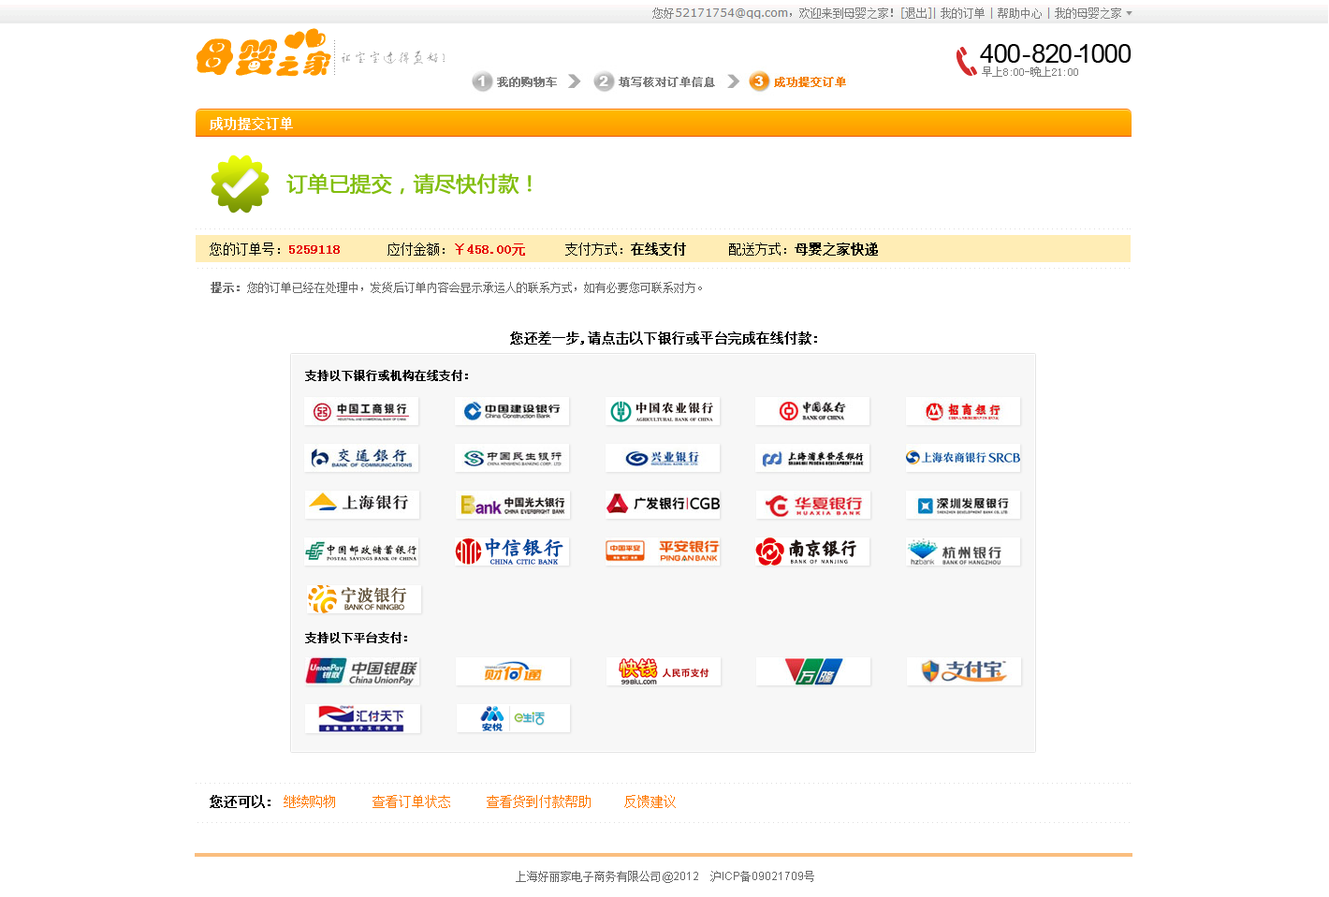
<style>
.page{position:relative;width:1329px;height:897px;background:#ffffff}
.page>*{position:absolute;margin:0}
.t1{font:13.1px "SimSun";color:#ffffff;font-weight:bold}
.t2{font:20.6px "MicrosoftYaHei";color:#82be0e;font-weight:bold}
.t3{font:13.1px "SimSun";color:#e60000;font-weight:bold}
.t4{font:13.1px "SimSun";color:#000000}
.t5{font:13.1px "SimSun";color:#000000;font-weight:bold}
.t6{font:11.2px "SimSun";color:#666666}
.t7{font:11.2px "SimSun";color:#666666;font-weight:bold}
.t8{font:11.2px "SimSun";color:#000000;font-weight:bold}
.t9{font:13.1px "SimSun";color:#ff7800}
.t10{font:11.2px "ArialMT";color:#666666}
</style>
<div class="page">
<p class="t1" style="left:210px;top:117px;width:83px;height:13px">成功提交订单</p>
<p class="t2" style="left:286px;top:173px;width:246px;height:22px">订单已提交，请尽快付款！</p>
<p class="t3" style="left:210px;top:242px;width:668px;height:14px"><span class="t4">您的订单号：</span>5259118  <span class="t4">应付金额：</span>￥458.00元   <span class="t4">支付方式：</span><span class="t5">在线支付  </span><span class="t4">配送方式：</span><span class="t5">母婴之家快递</span></p>
<p class="t6" style="left:211px;top:282px;width:491px;height:11px"><span class="t7">提示：</span>您的订单已经在处理中，发货后订单内容会显示承运人的联系方式，如有必要您可联系对方。</p>
<p class="t5" style="left:510px;top:331px;width:307px;height:14px">您还差一步,请点击以下银行或平台完成在线付款:</p>
<p class="t8" style="left:305px;top:370px;width:163px;height:11px">支持以下银行或机构在线支付：</p>
<p class="t8" style="left:305px;top:632px;width:102px;height:11px">支持以下平台支付：</p>
<p class="t5" style="left:210px;top:795px;width:61px;height:13px">您还可以:</p>
<p class="t9" style="left:284px;top:795px;width:392px;height:13px">继续购物      查看订单状态      查看货到付款帮助 反馈建议</p>
<p class="t6" style="left:516px;top:871px;width:299px;height:12px">上海好丽家电子商务有限公司<span class="t10">@2012    </span>沪<span class="t10">ICP</span>备<span class="t10">09021709</span>号</p>
</div>
